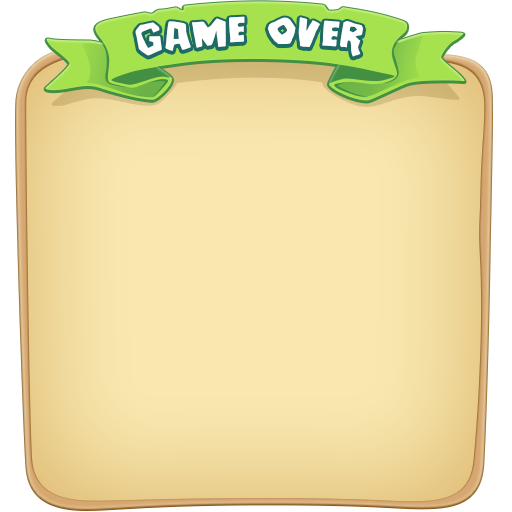
<style>
.page{position:relative;width:512px;height:512px;background:#f8e8b0}
.page>*{position:absolute;margin:0}
.t1{font:60px "Deanna";letter-spacing:0.05em;color:#ffffff}
</style>
<div class="page">
<p class="t1" style="left:135px;top:16px;width:228px;height:41px">Game OveR</p>
</div>
